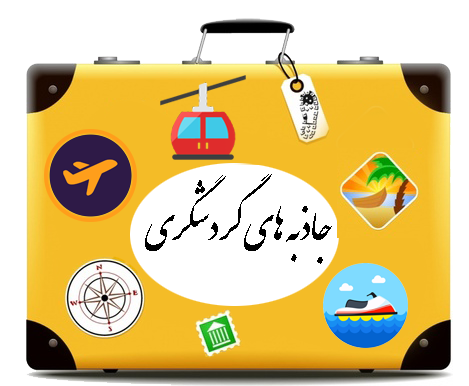
<style>
.page{position:relative;width:469px;height:386px;background:#ffffff}
.page>*{position:absolute;margin:0}
.t1{font:41px "IranNastaliq";color:#000000}
</style>
<div class="page">
<p class="t1" style="left:145px;top:174px;width:187px;height:90px;text-align:center">جاذبه های گردشگری</p>
</div>
